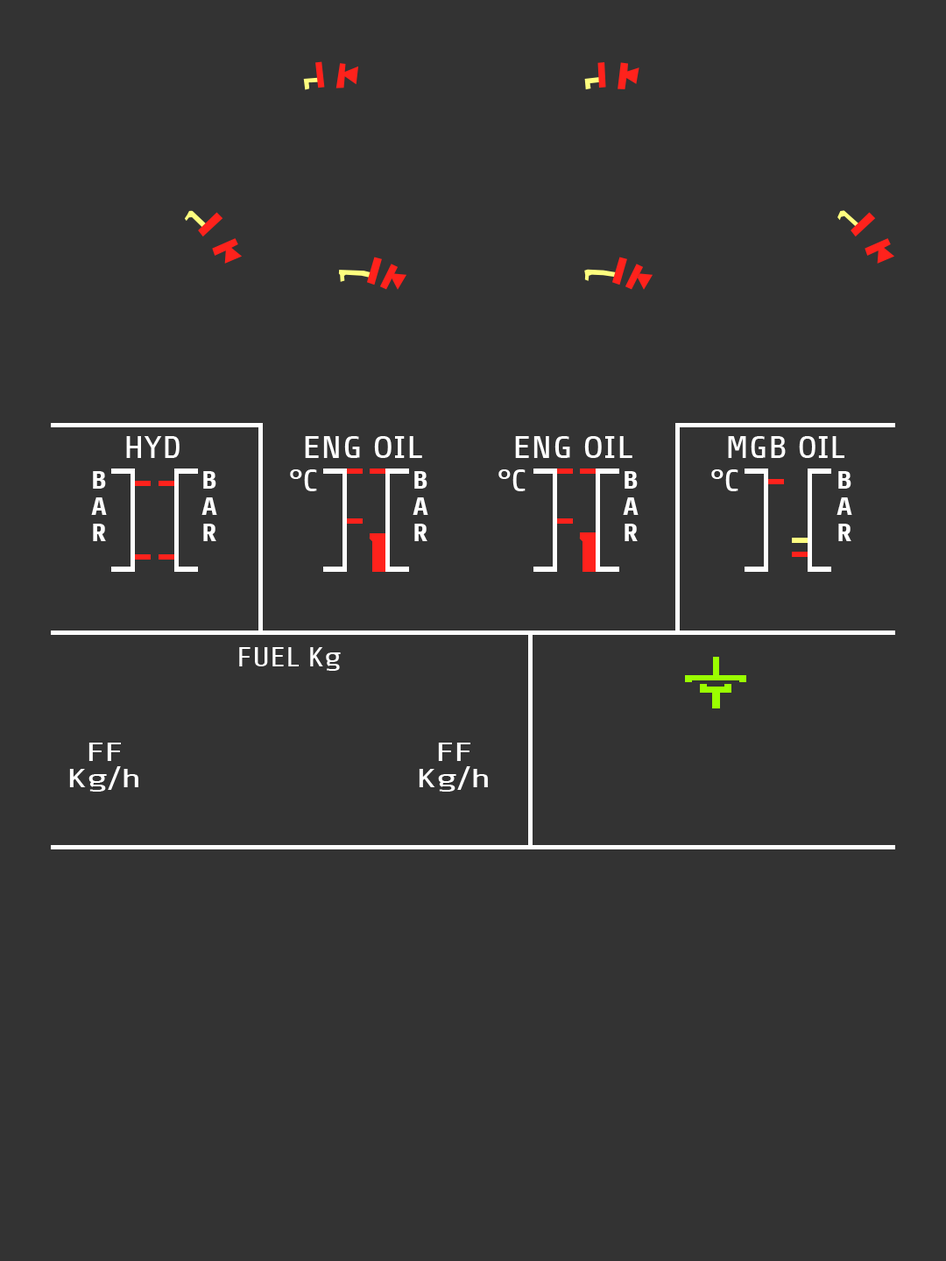
<style>
.page{position:relative;width:946px;height:1261px;background:#333333}
.page>*{position:absolute;margin:0}
.t1{font:31.5px "Share-Regular";color:#ffffff;scale:1.19 1}
.t2{font:31.5px "Share-Regular";color:#ffffff;scale:1.25 1}
.t3{font:24.5px/26.3px "Share-Bold";color:#ffffff;scale:1.19 1}
.t4{font:28.3px "Share-Regular";color:#ffffff;scale:1.18 1}
.t5{font:26.2px/26.3px "Share-Regular";color:#ffffff;scale:1.54 1}
</style>
<div class="page">
<p class="t1" style="left:126px;top:436px;width:54px;height:22px">HYD</p>
<p class="t2" style="left:305px;top:436px;width:117px;height:22px">ENG OIL</p>
<p class="t2" style="left:515px;top:436px;width:117px;height:22px">ENG OIL</p>
<p class="t1" style="left:728px;top:436px;width:116px;height:22px">MGB OIL</p>
<p class="t3" style="left:91px;top:471px;width:16px;height:70px">B<br>A<br>R</p>
<p class="t3" style="left:201px;top:471px;width:16px;height:70px">B<br>A<br>R</p>
<p class="t1" style="left:290px;top:469px;width:27px;height:22px">°C</p>
<p class="t3" style="left:412px;top:471px;width:16px;height:70px">B<br>A<br>R</p>
<p class="t1" style="left:498px;top:469px;width:27px;height:22px">°C</p>
<p class="t3" style="left:623px;top:471px;width:15px;height:70px">B<br>A<br>R</p>
<p class="t1" style="left:711px;top:469px;width:27px;height:22px">°C</p>
<p class="t3" style="left:836px;top:471px;width:16px;height:70px">B<br>A<br>R</p>
<p class="t4" style="left:239px;top:647px;width:102px;height:24px">FUEL Kg</p>
<p class="t5" style="left:69px;top:743px;width:69px;height:49px;text-align:center">FF<br>Kg/h</p>
<p class="t5" style="left:419px;top:743px;width:69px;height:49px;text-align:center">FF<br>Kg/h</p>
</div>
